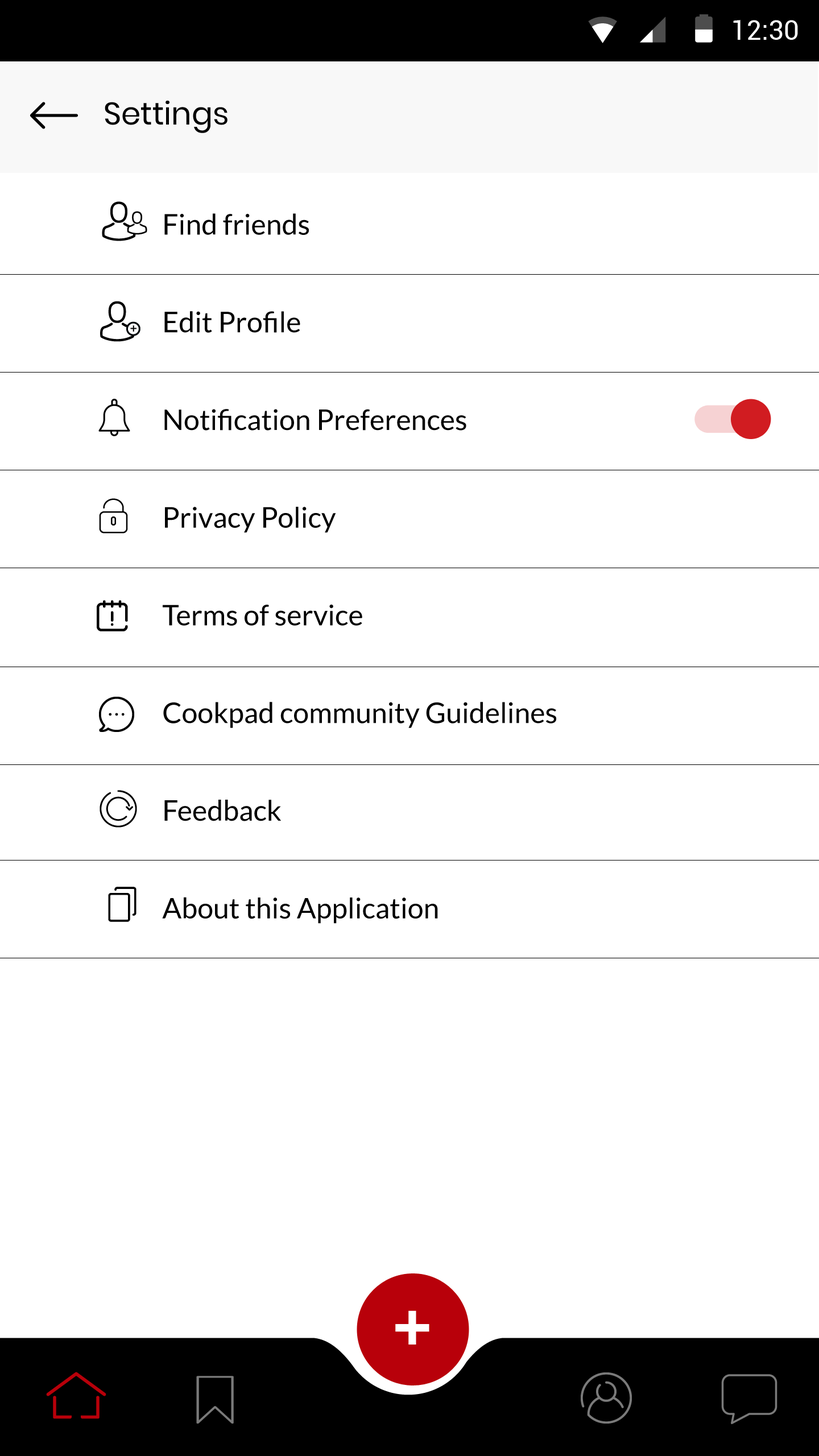
<style>
.page{position:relative;width:819px;height:1456px;background:#ffffff}
.page>*{position:absolute;margin:0}
.t1{font:27.3px "Roboto-Regular";color:#ffffff}
.t2{font:31.3px "Poppins-Regular";color:#000000}
.t3{font:28.4px/97.7px "Lato-Regular";color:#000000}
.t4{font:69.3px "OpenSans-Bold";color:#ffffff;text-transform:uppercase}
</style>
<div class="page">
<p class="t1" style="left:733px;top:20px;width:65px;height:20px">12:30</p>
<p class="t2" style="left:105px;top:100px;width:122px;height:33px">Settings</p>
<p class="t3" style="left:162px;top:213px;width:394px;height:711px">Find friends<br>Edit Profile<br>Notification Preferences<br>Privacy Policy<br>Terms of service<br>Cookpad community Guidelines<br>Feedback<br>About this Application</p>
<p class="t4" style="left:395px;top:1310px;width:34px;height:35px">+</p>
</div>
